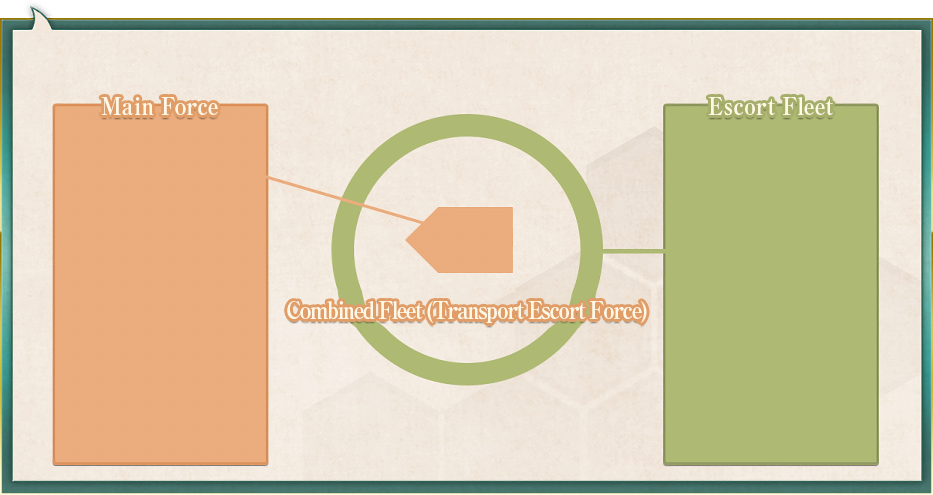
<style>
.page{position:relative;width:933px;height:495px}
.page>*{position:absolute;margin:0}
.t1{font:24px "RyuminPro-ExBold";color:#fff8e7;scale:0.9 1}
.t2{font:24px "RyuminPro-ExBold";letter-spacing:-0.08em;color:#fff8e7;scale:0.9 1}
</style>
<div class="page">
<p class="t1" style="left:101px;top:97px;width:117px;height:18px">Main Force</p>
<p class="t1" style="left:708px;top:97px;width:125px;height:19px">Escort Fleet</p>
<p class="t2" style="left:287px;top:301px;width:360px;height:22px">Combined Fleet (Transport Escort Force)</p>
</div>
